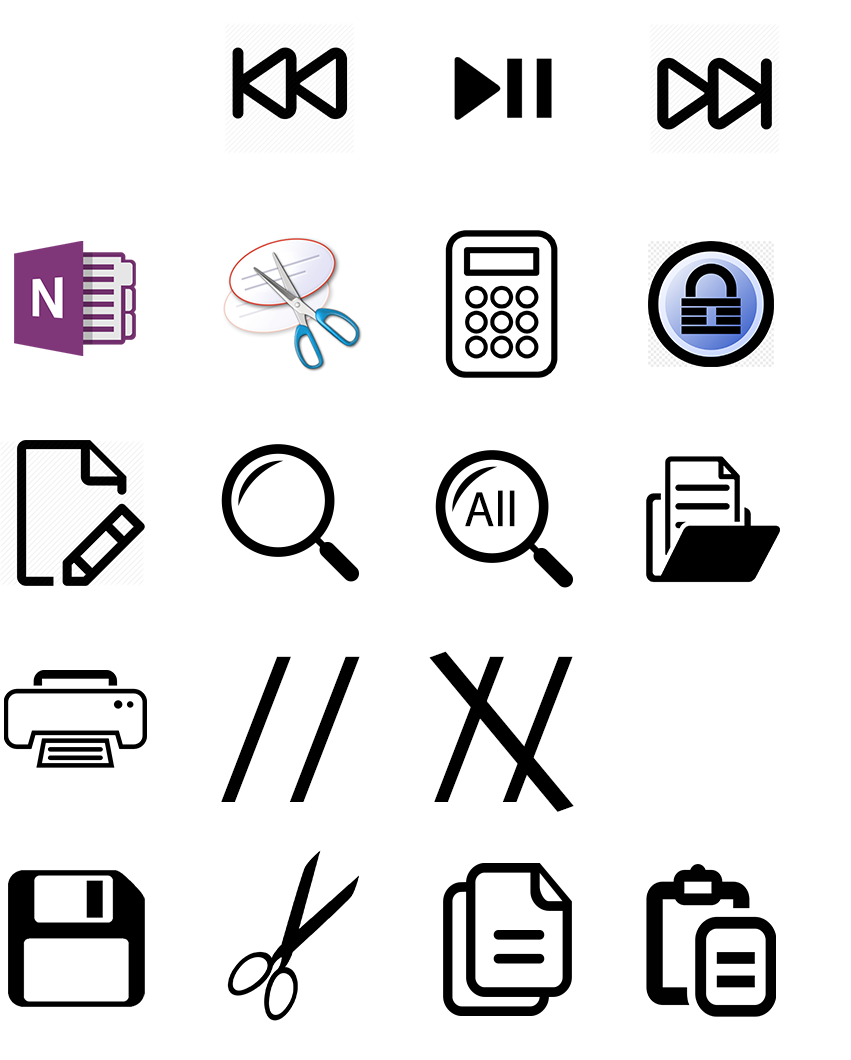
<style>
.page{position:relative;width:851px;height:1060px;background:#ffffff}
.page>*{position:absolute;margin:0}
.t1{font:50px "MyriadPro-Regular";color:#010101}
.t2{font:260px "MyriadPro-Regular";color:#000000;scale:0.96 1}
.t3{font:200px "MyriadPro-Regular";color:#000000}
</style>
<div class="page">
<p class="t1" style="left:465px;top:490px;width:50px;height:37px">All</p>
<p class="t2" style="left:429px;top:651px;width:145px;height:161px;rotate:-20deg">\</p>
<p class="t3" style="left:221px;top:656px;width:139px;height:146px">//</p>
<p class="t3" style="left:434px;top:656px;width:139px;height:146px">//</p>
</div>
